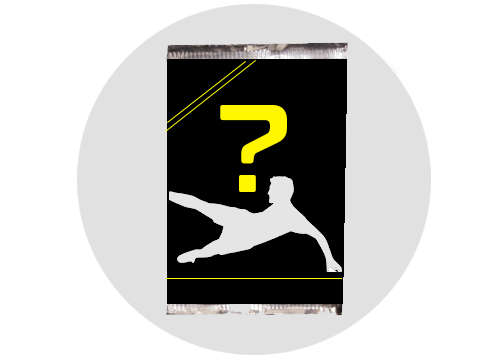
<style>
.page{position:relative;width:504px;height:360px;background:#ffffff}
.page>*{position:absolute;margin:0}
.t1{font:119.4px "ConthraxSb-Regular";color:#fff600}
</style>
<div class="page">
<p class="t1" style="left:220px;top:105px;width:67px;height:87px">?</p>
</div>
